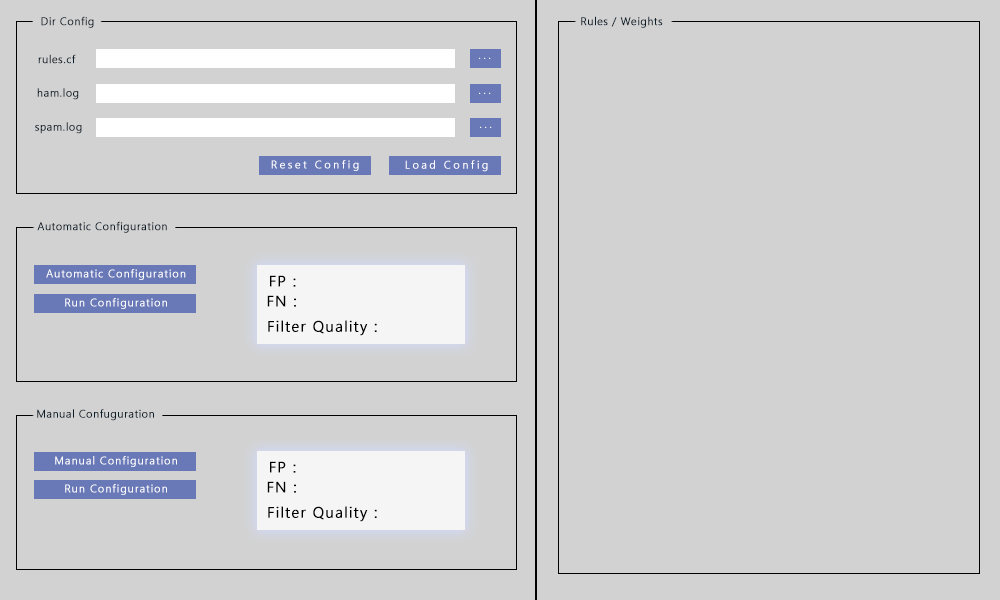
<style>
.page{position:relative;width:1000px;height:600px;background:#d2d2d2}
.page>*{position:absolute;margin:0}
.t1{font:11px "SegoeUI-Semilight";letter-spacing:0.03em;color:#0a1e2a;font-weight:bold}
.t2{font:11px "SegoeUI-Semilight";letter-spacing:0.21em;color:#ffffff;font-weight:bold}
.t3{font:11px "SegoeUI-Semilight";letter-spacing:0.07em;color:#ffffff;font-weight:bold}
.t4{font:15px "SegoeUI-Semilight";letter-spacing:0.07em;color:#000000;font-weight:bold}
</style>
<div class="page">
<p class="t1" style="left:41px;top:16px;width:53px;height:12px">Dir Config</p>
<p class="t1" style="left:581px;top:16px;width:82px;height:12px">Rules / Weights</p>
<p class="t1" style="left:38px;top:54px;width:38px;height:10px">rules.cf</p>
<p class="t2" style="left:479px;top:57px;width:12px;height:2px">...</p>
<p class="t1" style="left:37px;top:88px;width:42px;height:12px">ham.log</p>
<p class="t2" style="left:479px;top:92px;width:12px;height:2px">...</p>
<p class="t1" style="left:35px;top:122px;width:47px;height:12px">spam.log</p>
<p class="t2" style="left:480px;top:126px;width:12px;height:2px">...</p>
<p class="t2" style="left:271px;top:160px;width:88px;height:11px">Reset Config</p>
<p class="t2" style="left:405px;top:160px;width:83px;height:12px">Load Config</p>
<p class="t1" style="left:37px;top:221px;width:130px;height:12px">Automatic Configuration</p>
<p class="t3" style="left:46px;top:269px;width:140px;height:11px">Automatic Configuration</p>
<p class="t4" style="left:270px;top:275px;width:26px;height:12px">FP :</p>
<p class="t3" style="left:65px;top:298px;width:102px;height:11px">Run Configuration</p>
<p class="t4" style="left:267px;top:295px;width:29px;height:12px">FN :</p>
<p class="t4" style="left:268px;top:320px;width:109px;height:16px">Filter Quality :</p>
<p class="t1" style="left:37px;top:409px;width:117px;height:12px">Manual Confuguration</p>
<p class="t3" style="left:55px;top:456px;width:122px;height:11px">Manual Configuration</p>
<p class="t4" style="left:270px;top:461px;width:26px;height:12px">FP :</p>
<p class="t3" style="left:65px;top:484px;width:102px;height:11px">Run Configuration</p>
<p class="t4" style="left:267px;top:481px;width:29px;height:12px">FN :</p>
<p class="t4" style="left:268px;top:506px;width:109px;height:16px">Filter Quality :</p>
</div>
